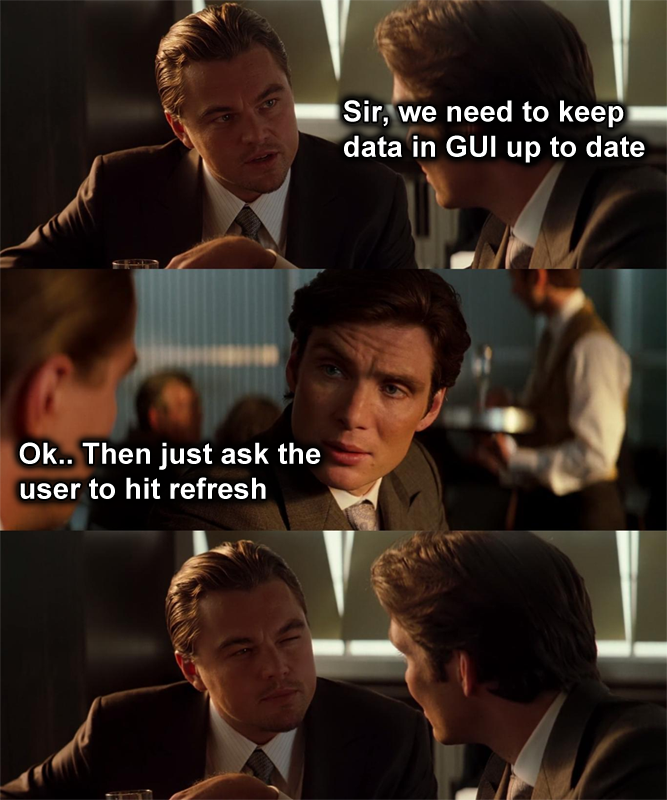
<style>
.page{position:relative;width:667px;height:800px}
.page>*{position:absolute;margin:0}
.t1{font:29.3px "Arial-BoldMT";color:#ffffff}
</style>
<div class="page">
<p class="t1" style="left:343px;top:100px;width:302px;height:63px">Sir, we need to keep data in GUI up to date</p>
<p class="t1" style="left:19px;top:442px;width:302px;height:57px">Ok.. Then just ask the user to hit refresh</p>
</div>
